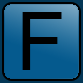
<style>
.page{position:relative;width:83px;height:83px;background:#055a8e}
.page>*{position:absolute;margin:0}
.t1{font:90px "Raavi";color:#000000}
</style>
<div class="page">
<p class="t1" style="left:22px;top:12px;width:40px;height:58px">F</p>
</div>
